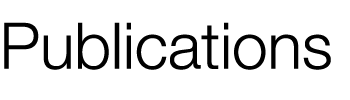
<style>
.page{position:relative;width:350px;height:100px;background:#ffffff}
.page>*{position:absolute;margin:0}
.t1{font:64px "HelveticaNeue-Light";color:#000000}
</style>
<div class="page">
<p class="t1" style="left:4px;top:22px;width:327px;height:48px">Publications</p>
</div>
